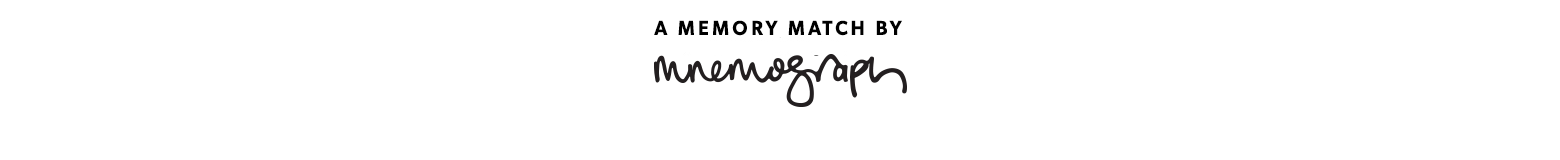
<style>
.page{position:relative;width:1560px;height:160px;background:#ffffff}
.page>*{position:absolute;margin:0}
.t1{font:20px "Gibson-SemiBold";letter-spacing:0.185em;color:#000000;scale:0.95 1}
</style>
<div class="page">
<p class="t1" style="left:654px;top:20px;width:248px;height:16px">A MEMORY MATCH BY</p>
</div>
